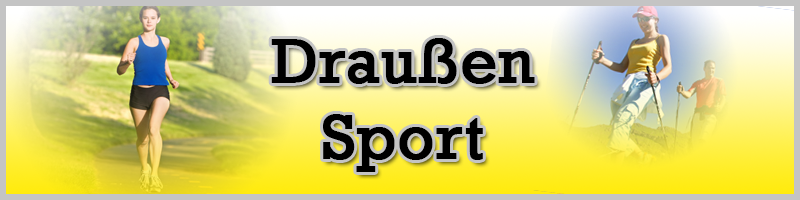
<style>
.page{position:relative;width:800px;height:200px}
.page>*{position:absolute;margin:0}
.t1{font:63px "Rockwell";color:#000000;font-weight:bold}
</style>
<div class="page">
<p class="t1" style="left:271px;top:38px;width:264px;height:134px;text-align:center">Draußen<br>Sport</p>
</div>
